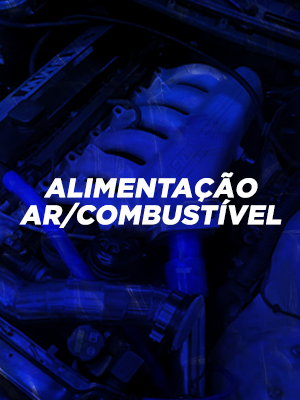
<style>
.page{position:relative;width:300px;height:400px}
.page>*{position:absolute;margin:0}
.t1{font:27px/27px "Gotham-Black";letter-spacing:0.01em;color:#fffefe;text-transform:uppercase;font-style:italic}
</style>
<div class="page">
<p class="t1" style="left:19px;top:172px;width:263px;height:56px;text-align:center">alimentação<br>ar/combustível</p>
</div>
